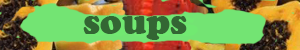
<style>
.page{position:relative;width:300px;height:50px;background:#73e473}
.page>*{position:absolute;margin:0}
.t1{font:36px "CooperBlack";color:#336633}
</style>
<div class="page">
<p class="t1" style="left:83px;top:16px;width:104px;height:24px">soups</p>
</div>
